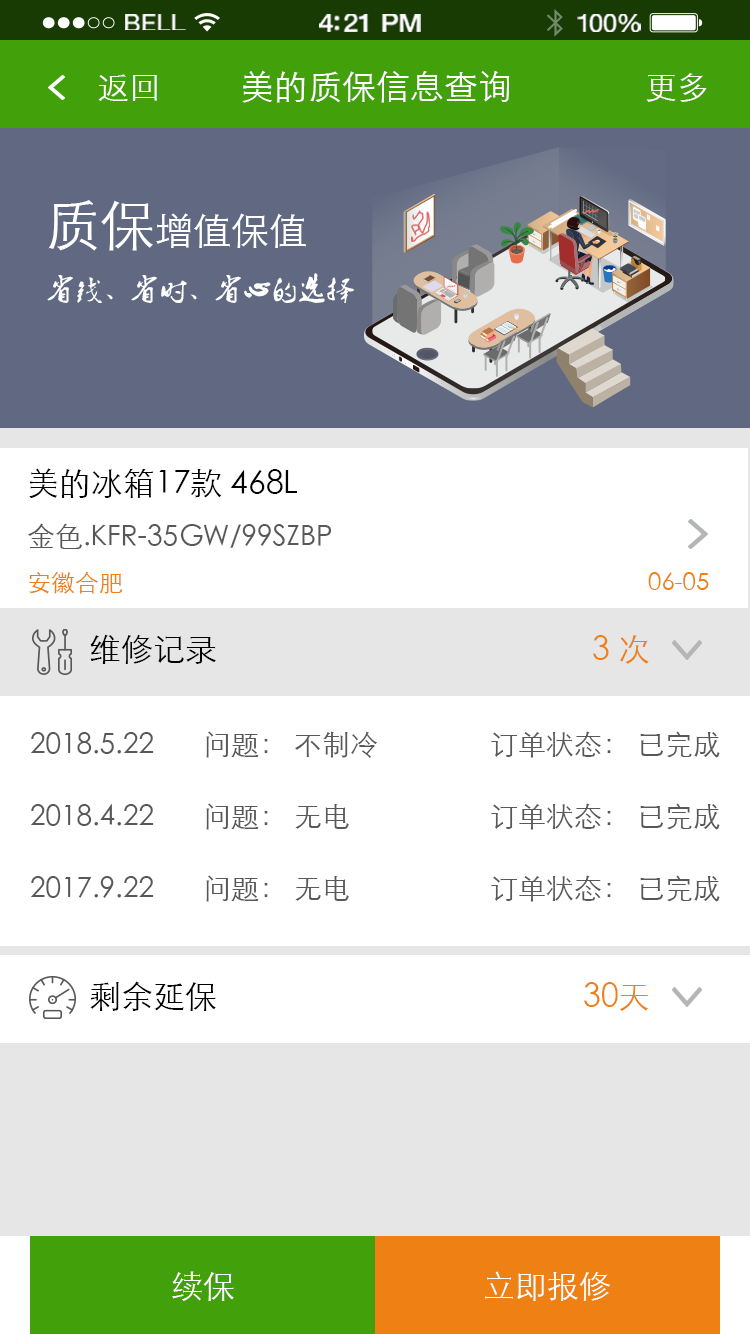
<style>
.page{position:relative;width:750px;height:1334px;background:#ffffff}
.page>*{position:absolute;margin:0}
.t1{font:23.3px "HelveticaNeue";letter-spacing:0.02em;color:#ffffff;scale:1.06 1}
.t2{font:25.3px "HelveticaNeue-Medium";letter-spacing:-0.02em;color:#ffffff;scale:1.06 1}
.t3{font:24.3px "HelveticaNeue";letter-spacing:-0.02em;color:#ffffff;scale:1.06 1}
.t4{font:32px "STXihei";color:#ffffff}
.t5{font:34px "STXihei";color:#ffffff}
.t6{font:38px "STXihei";color:#ffffff}
.t7{font:55px "STXihei";color:#ffffff}
.t8{font:28px "Ò¶¸ùÓÑÃ«±ÊÐÐÊé";color:#ffffff}
.t9{font:28px/56px "STXihei";color:#595757}
.t10{font:32px/56px "STXihei";color:#000000}
.t11{font:24px "STXihei";color:#ef8013}
.t12{font:32px "STXihei";color:#000000}
.t13{font:32px "STXihei";color:#ef8014}
.t14{font:28px/72px "STXihei";color:#595757}
</style>
<div class="page">
<p class="t1" style="left:125px;top:14px;width:61px;height:16px">BELL</p>
<p class="t2" style="left:319px;top:14px;width:102px;height:18px">4:21 PM</p>
<p class="t3" style="left:577px;top:14px;width:64px;height:18px">100%</p>
<p class="t4" style="left:98px;top:74px;width:59px;height:27px">返回</p>
<p class="t5" style="left:242px;top:70px;width:268px;height:33px">美的质保信息查询</p>
<p class="t4" style="left:646px;top:73px;width:61px;height:29px">更多</p>
<p class="t6" style="left:48px;top:200px;width:258px;height:51px"><span class="t7">质保</span>增值保值</p>
<p class="t8" style="left:47px;top:273px;width:307px;height:30px">省钱、省时、省心的选择</p>
<p class="t9" style="left:28px;top:468px;width:304px;height:81px"><span class="t10">美的冰箱17款 468L <br></span>金色.KFR-35GW/99SZBP</p>
<p class="t11" style="left:29px;top:571px;width:94px;height:23px">安徽合肥</p>
<p class="t11" style="left:648px;top:572px;width:61px;height:18px">06-05</p>
<p class="t12" style="left:90px;top:634px;width:126px;height:30px">维修记录</p>
<p class="t13" style="left:593px;top:635px;width:56px;height:29px">3 次</p>
<p class="t14" style="left:30px;top:731px;width:690px;height:171px">2018.5.22       问题： 不制冷                订单状态： 已完成<br>2018.4.22       问题： 无电                    订单状态： 已完成<br>2017.9.22       问题： 无电                    订单状态： 已完成</p>
<p class="t12" style="left:90px;top:981px;width:126px;height:30px">剩余延保</p>
<p class="t13" style="left:584px;top:982px;width:64px;height:29px">30天</p>
<p class="t4" style="left:172px;top:1271px;width:62px;height:30px">续保</p>
<p class="t4" style="left:485px;top:1271px;width:125px;height:30px">立即报修</p>
</div>
